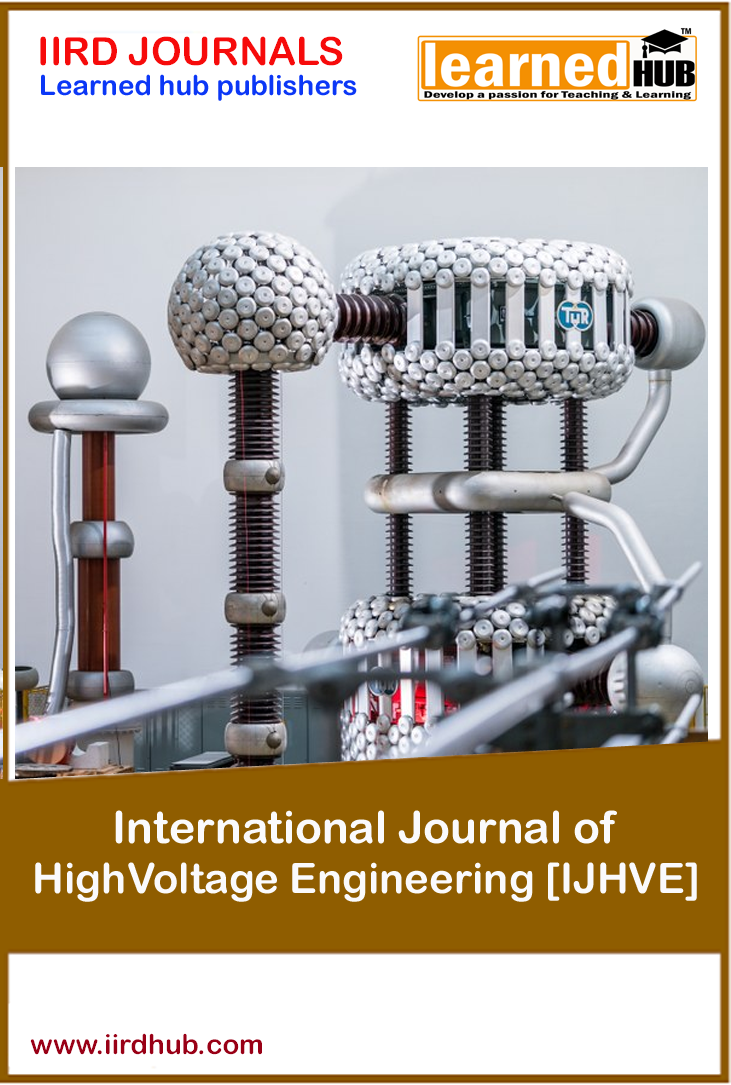
<style>
.page{position:relative;width:731px;height:1085px;background:#ffffff}
.page>*{position:absolute;margin:0}
.t1{font:38.9px "ArialRoundedMTBold";color:#f60b0b}
.t2{font:27.8px "ArialRoundedMTBold";color:#0b37f6}
.t3{font:41.7px "ArialRoundedMTBold";color:#fafafc}
.t4{font:44.4px "ArialRoundedMTBold";color:#fafafc}
.t5{font:27.8px "ArialRoundedMTBold";color:#990016}
</style>
<div class="page">
<p class="t1" style="left:40px;top:36px;width:303px;height:30px">IIRD JOURNALS</p>
<p class="t2" style="left:41px;top:74px;width:316px;height:27px">Learned hub publishers</p>
<p class="t3" style="left:35px;top:810px;width:662px;height:92px;text-align:center"><span class="t4">International Journal of <br></span>HighVoltage Engineering [IJHVE]</p>
<p class="t5" style="left:30px;top:1033px;width:232px;height:22px">www.iirdhub.com</p>
</div>
